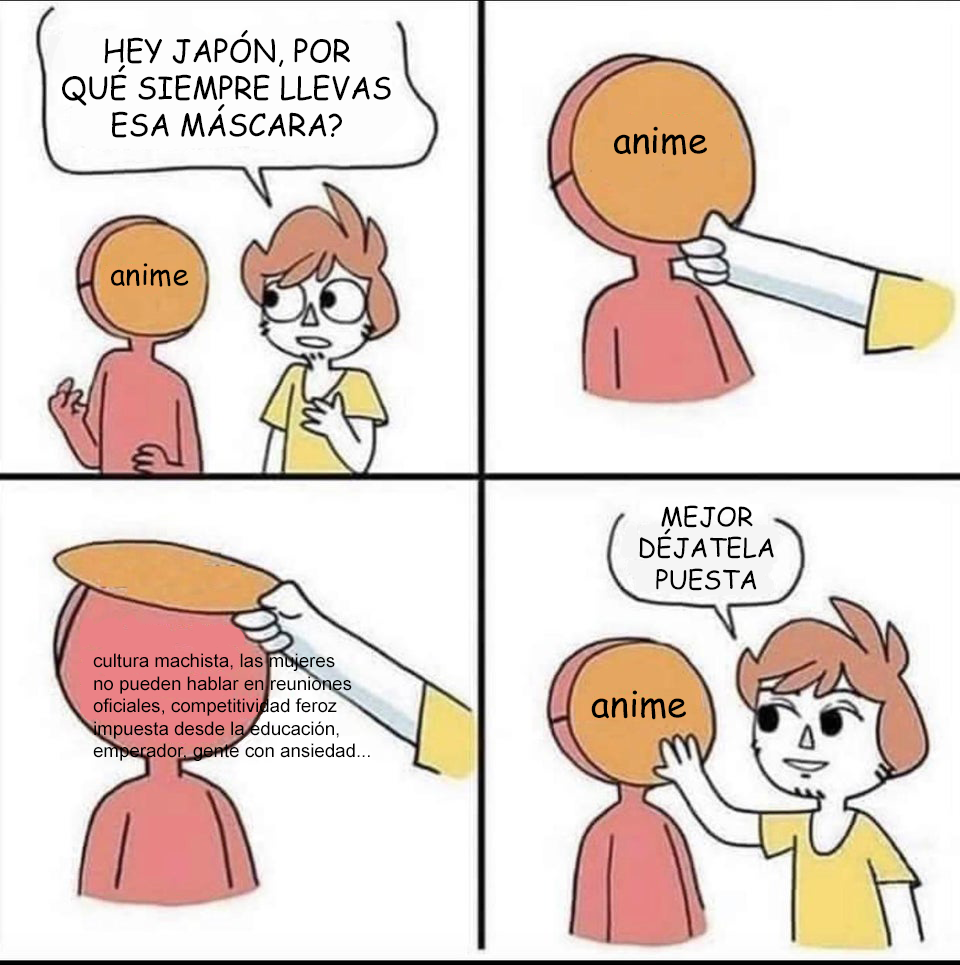
<style>
.page{position:relative;width:960px;height:965px;background:#ffffff}
.page>*{position:absolute;margin:0}
.t1{font:31.1px "ComicSansMS";color:#000000;scale:0.95 1}
.t2{font:36px "ComicSansMS";color:#000000}
.t3{font:29.9px "ComicSansMS";color:#000000}
.t4{font:25.9px "ComicSansMS";color:#000000}
.t5{font:18.7px "ArialMT";color:#000000}
.t6{font:36.2px "ComicSansMS";color:#000000}
</style>
<div class="page">
<p class="t1" style="left:62px;top:30px;width:329px;height:108px;text-align:center">HEY JAPÓN, POR<br>QUÉ SIEMPRE LLEVAS<br>ESA MÁSCARA?</p>
<p class="t2" style="left:614px;top:126px;width:93px;height:30px">anime</p>
<p class="t3" style="left:111px;top:263px;width:78px;height:24px">anime</p>
<p class="t4" style="left:639px;top:505px;width:135px;height:86px;text-align:center">MEJOR<br>DÉJATELA<br>PUESTA</p>
<p class="t5" style="left:93px;top:653px;width:277px;height:108px">cultura machista, las mujeres<br>no pueden hablar en reuniones<br>oficiales, competitividad feroz<br>impuesta desde la educación,<br>emperador, gente con ansiedad...</p>
<p class="t6" style="left:591px;top:690px;width:95px;height:30px">anime</p>
</div>
